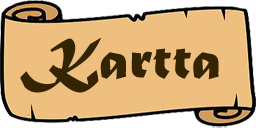
<style>
.page{position:relative;width:256px;height:128px;background:#efbf7f}
.page>*{position:absolute;margin:0}
.t1{font:60px "MaturaMTScriptCapitals";color:#352401}
</style>
<div class="page">
<p class="t1" style="left:20px;top:38px;width:199px;height:55px">Kartta</p>
</div>
